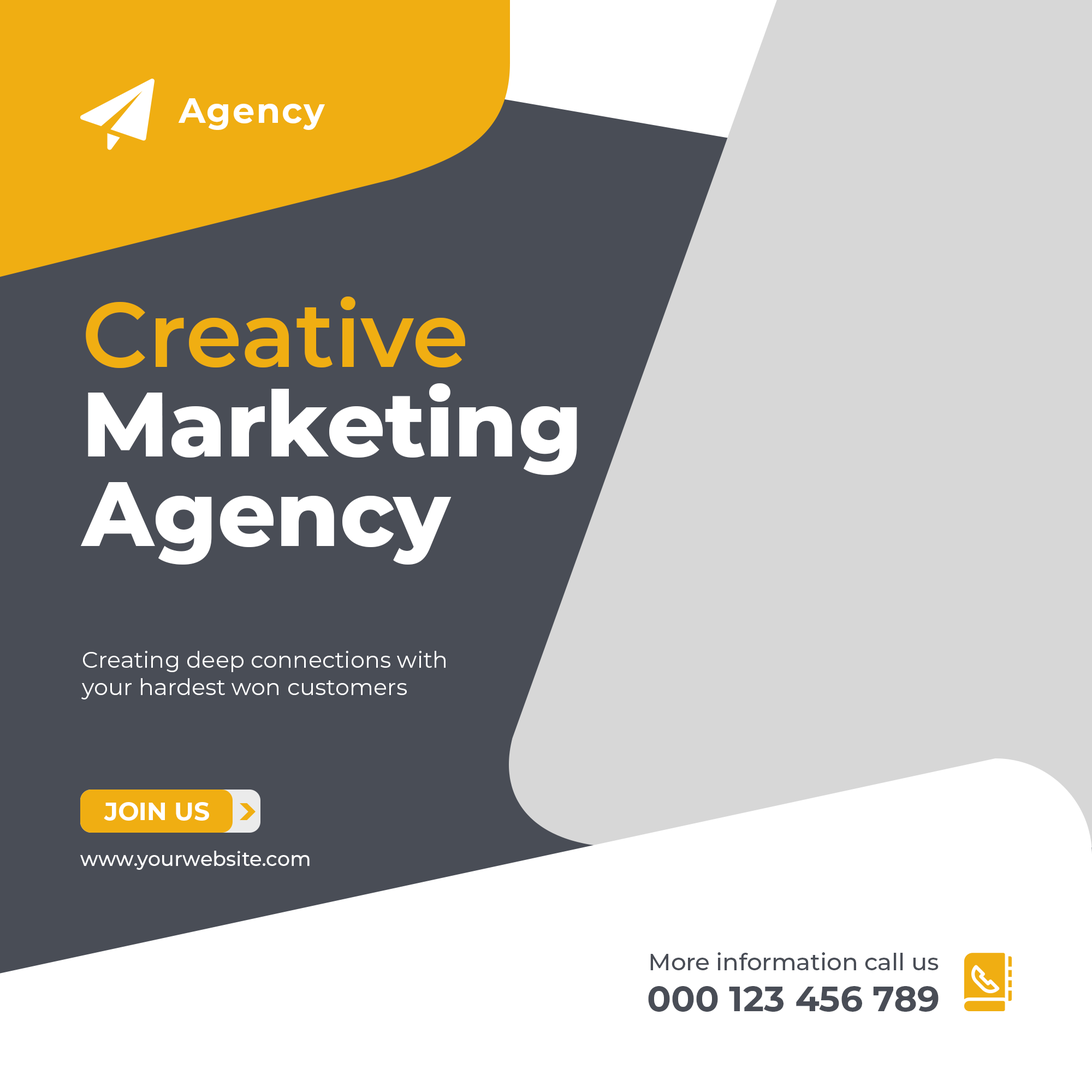
<style>
.page{position:relative;width:1092px;height:1092px;background:#d7d7d7}
.page>*{position:absolute;margin:0}
.t1{font:34.9px "Montserrat-Bold";letter-spacing:0.04em;color:#ffffff}
.t2{font:91px/89.8px "Montserrat-ExtraBold";color:#ffffff}
.t3{font:91px/89.8px "Montserrat-SemiBold";color:#f0ae12}
.t4{font:22.7px/27.3px "Montserrat-Regular";color:#ffffff}
.t5{font:24.9px "Montserrat-Bold";color:#ffffff;text-transform:uppercase}
.t6{font:20px "Montserrat-Medium";color:#ffffff}
.t7{font:23.6px "Montserrat-Medium";color:#494d56}
.t8{font:35.4px "Montserrat-Bold";color:#494d56;text-transform:uppercase}
</style>
<div class="page">
<p class="t1" style="left:178px;top:98px;width:147px;height:32px">Agency</p>
<p class="t2" style="left:81px;top:296px;width:496px;height:269px"><span class="t3">Creative<br></span>Marketing<br>Agency</p>
<p class="t4" style="left:81px;top:651px;width:365px;height:48px">Creating deep connections with your hardest won customers</p>
<p class="t5" style="left:104px;top:802px;width:105px;height:19px">join us</p>
<p class="t6" style="left:80px;top:851px;width:230px;height:19px">www.yourwebsite.com</p>
<p class="t7" style="left:650px;top:952px;width:289px;height:18px">More information call us</p>
<p class="t8" style="left:648px;top:986px;width:291px;height:26px">000 123 456 789</p>
</div>
